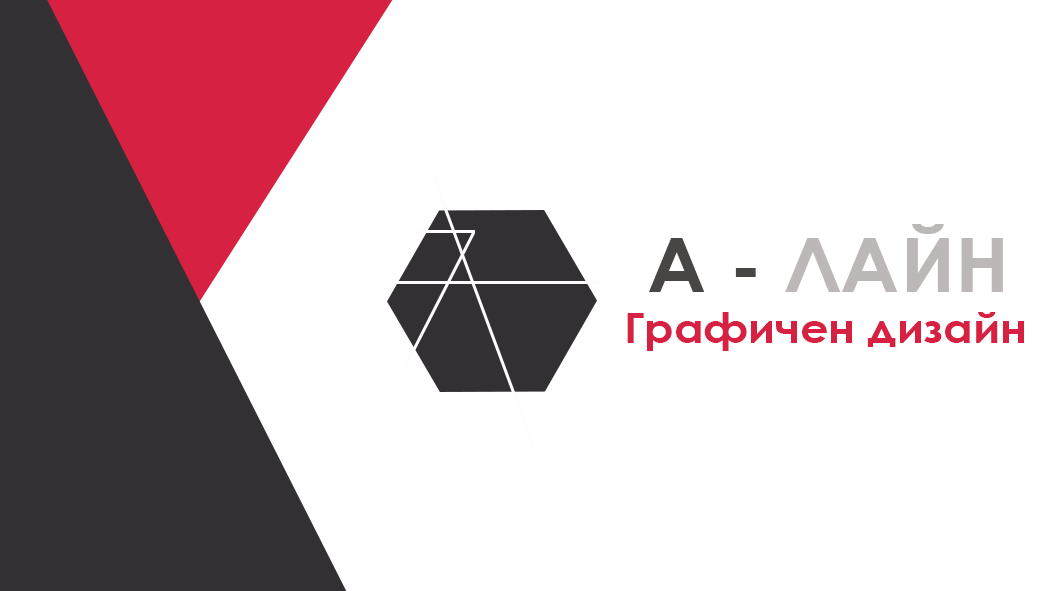
<style>
.page{position:relative;width:1063px;height:591px;background:#ffffff}
.page>*{position:absolute;margin:0}
.t1{font:75px "CenturyGothic-Bold";color:#bcb8b8;scale:1.07 1}
.t2{font:75px "CenturyGothic-Bold";color:#484545;scale:1.07 1}
.t3{font:41.7px "CenturyGothic-Bold";color:#d72143;scale:1.07 1}
</style>
<div class="page">
<p class="t1" style="left:649px;top:224px;width:354px;height:68px"><span class="t2">А - </span>ЛАЙН</p>
<p class="t3" style="left:627px;top:312px;width:397px;height:39px">Графичен дизайн</p>
</div>
